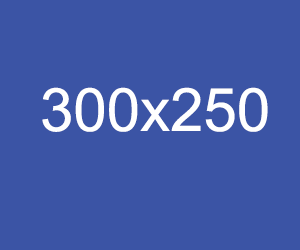
<style>
.page{position:relative;width:300px;height:250px;background:#3b54a5}
.page>*{position:absolute;margin:0}
.t1{font:60px "ArialMT";color:#ffffff}
</style>
<div class="page">
<p class="t1" style="left:42px;top:87px;width:226px;height:45px">300x250</p>
</div>
